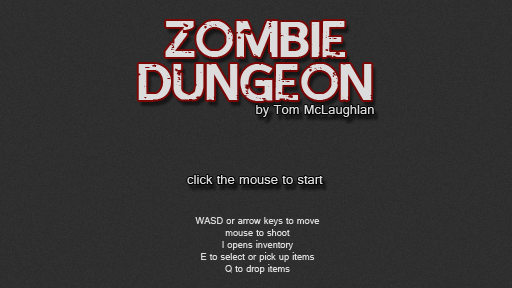
<style>
.page{position:relative;width:512px;height:288px}
.page>*{position:absolute;margin:0}
.t1{font:36px "IAMSHERLOCKED";color:#dcdcdc}
.t2{font:14px "Gautami";color:#dcdcdc}
.t3{font:10px "Gautami";color:#dcdcdc}
</style>
<div class="page">
<p class="t1" style="left:138px;top:21px;width:234px;height:80px;text-align:center">ZOMBIE<br>DUNGEON</p>
<p class="t2" style="left:256px;top:105px;width:118px;height:12px">by Tom McLaughlan</p>
<p class="t2" style="left:187px;top:175px;width:136px;height:9px">click the mouse to start</p>
<p class="t3" style="left:195px;top:217px;width:125px;height:57px;text-align:center">WASD or arrow keys to move<br>mouse to shoot<br>I opens inventory<br>E to select or pick up items<br>Q to drop items</p>
</div>
